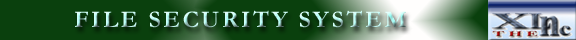
<style>
.page{position:relative;width:576px;height:40px;background:#0a400d}
.page>*{position:absolute;margin:0}
.t1{font:24px "Garamond-Bold";letter-spacing:0.1em}
</style>
<div class="page">
<p class="t1" style="left:75px;top:10px;width:331px;height:18px">FILE SECURITY SYSTEM</p>
</div>
